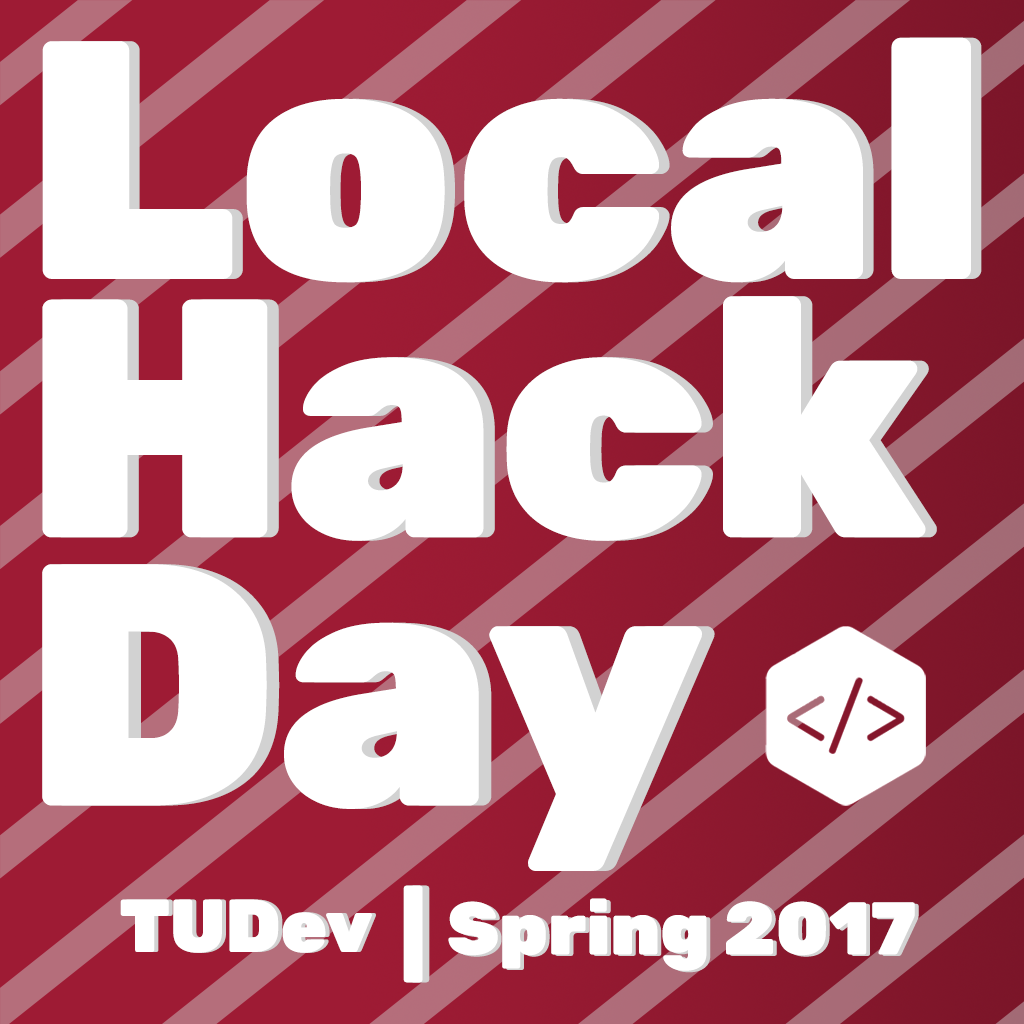
<style>
.page{position:relative;width:1024px;height:1024px;background:#ffffff}
.page>*{position:absolute;margin:0}
.t1{font:339.3px "Rubik-Black";color:#ffffff}
.t2{font:344.4px "Rubik-Black";color:#ffffff}
.t3{font:87.5px "Rubik-Black";color:#ffffff;scale:1.13 1}
.t4{font:87.5px "Rubik-Black";scale:1.13 1}
.t5{font:74.6px "Rubik-Black";color:#ffffff}
.t6{font:74.2px "Rubik-Black";color:#ffffff}
</style>
<div class="page">
<p class="t1" style="left:42px;top:37px;width:929px;height:246px">Local</p>
<p class="t1" style="left:53px;top:37px;width:929px;height:246px">Local</p>
<p class="t1" style="left:42px;top:296px;width:884px;height:245px">Hack</p>
<p class="t1" style="left:53px;top:296px;width:884px;height:245px">Hack</p>
<p class="t2" style="left:42px;top:564px;width:660px;height:307px">Day</p>
<p class="t2" style="left:54px;top:564px;width:661px;height:307px">Day</p>
<p class="t3" style="left:403px;top:885px;width:20px;height:98px">|</p>
<p class="t4" style="left:410px;top:885px;width:20px;height:98px">|</p>
<p class="t5" style="left:120px;top:899px;width:252px;height:54px">TUDev</p>
<p class="t5" style="left:124px;top:899px;width:252px;height:54px">TUDev</p>
<p class="t6" style="left:448px;top:898px;width:467px;height:73px">Spring 2017</p>
</div>
